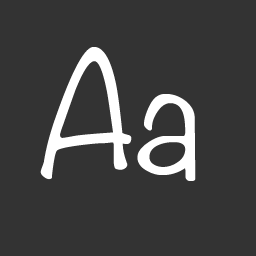
<style>
.page{position:relative;width:256px;height:256px;background:#333333}
.page>*{position:absolute;margin:0}
.t1{font:148px "Noteworthy-Light";color:#ffffff}
</style>
<div class="page">
<p class="t1" style="left:40px;top:47px;width:156px;height:134px">Aa</p>
</div>
